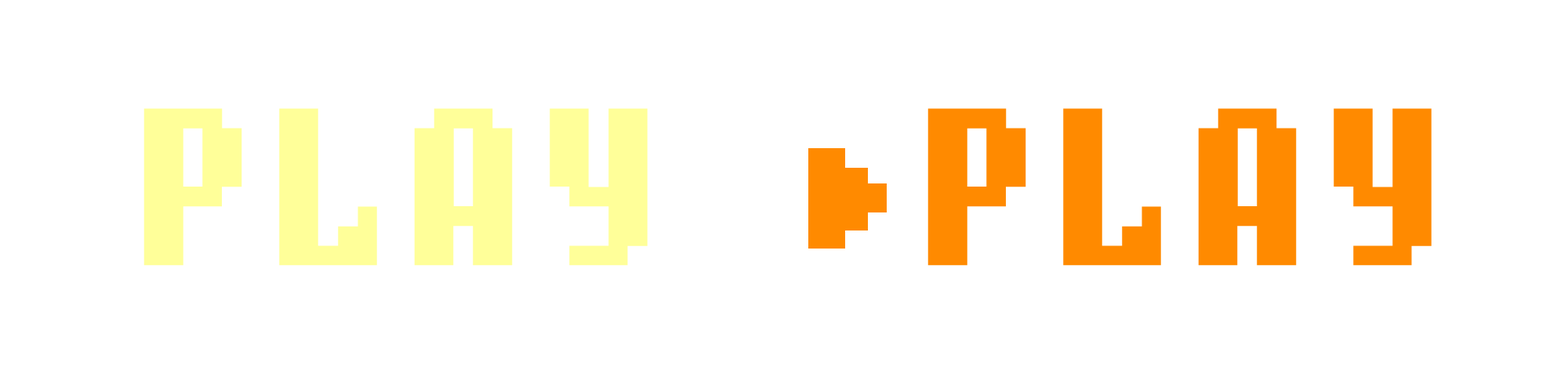
<style>
.page{position:relative;width:1568px;height:392px;background:#ffffff}
.page>*{position:absolute;margin:0}
.t1{font:235.2px "BMgermarA12";letter-spacing:0.075em;color:#ffff99}
.t2{font:235.2px "BMgermarA12";letter-spacing:0.075em;color:#ff8a00}
</style>
<div class="page">
<p class="t1" style="left:143px;top:108px;width:505px;height:158px">PLAY</p>
<p class="t2" style="left:927px;top:108px;width:505px;height:158px">PLAY</p>
</div>
